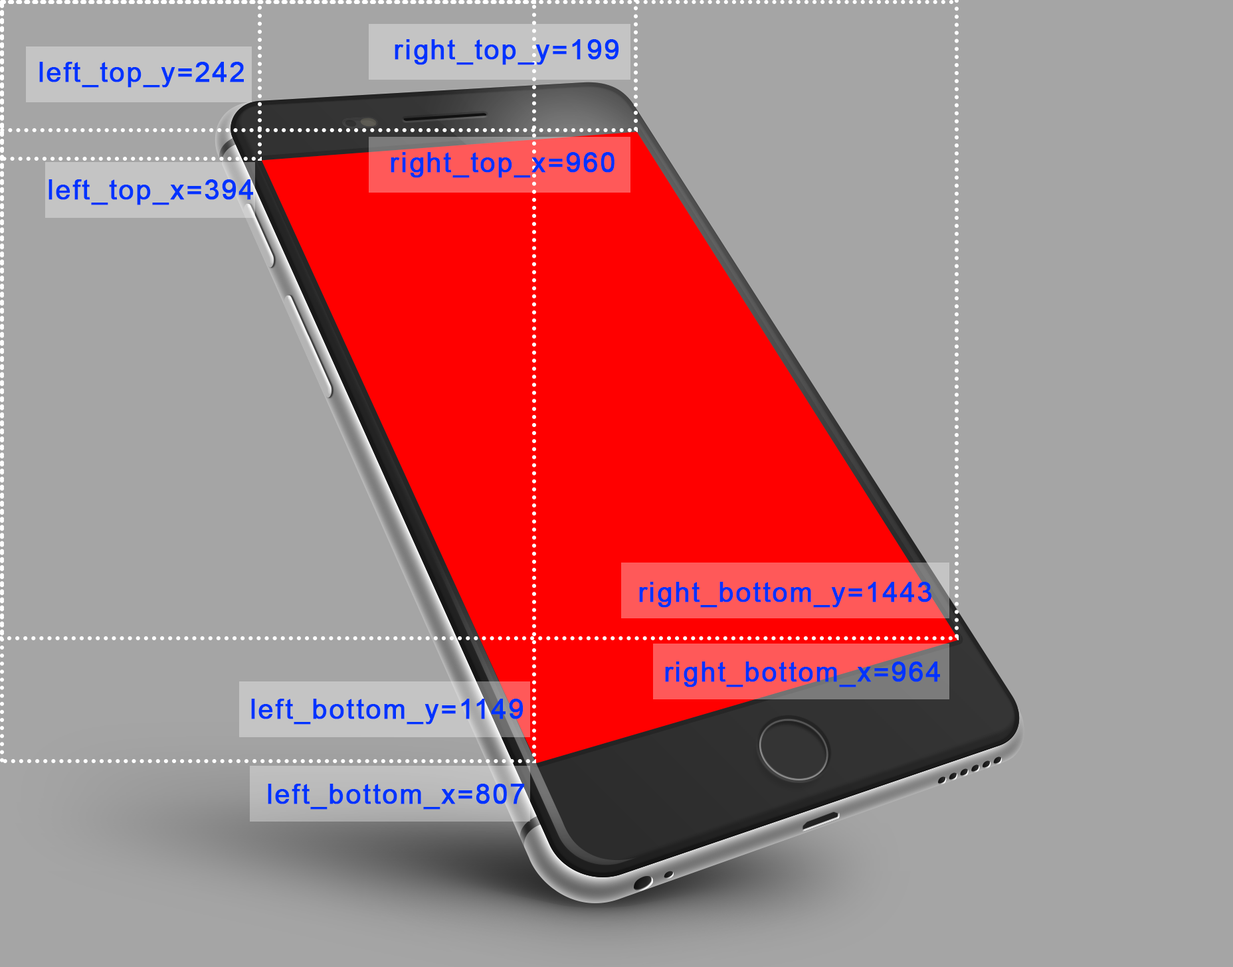
<style>
.page{position:relative;width:1233px;height:967px;background:#a5a5a5}
.page>*{position:absolute;margin:0}
.t1{font:27.2px "ArialMT";letter-spacing:0.05em;color:#0033ff;font-weight:bold}
</style>
<div class="page">
<p class="t1" style="left:395px;top:39px;width:224px;height:26px">right_top_y=199</p>
<p class="t1" style="left:39px;top:62px;width:205px;height:26px">left_top_y=242</p>
<p class="t1" style="left:391px;top:152px;width:223px;height:26px">right_top_x=960</p>
<p class="t1" style="left:48px;top:179px;width:205px;height:26px">left_top_x=394</p>
<p class="t1" style="left:639px;top:582px;width:293px;height:26px">right_bottom_y=1443</p>
<p class="t1" style="left:665px;top:662px;width:275px;height:26px">right_bottom_x=964</p>
<p class="t1" style="left:251px;top:699px;width:272px;height:26px">left_bottom_y=1149</p>
<p class="t1" style="left:268px;top:784px;width:257px;height:26px">left_bottom_x=807</p>
</div>
